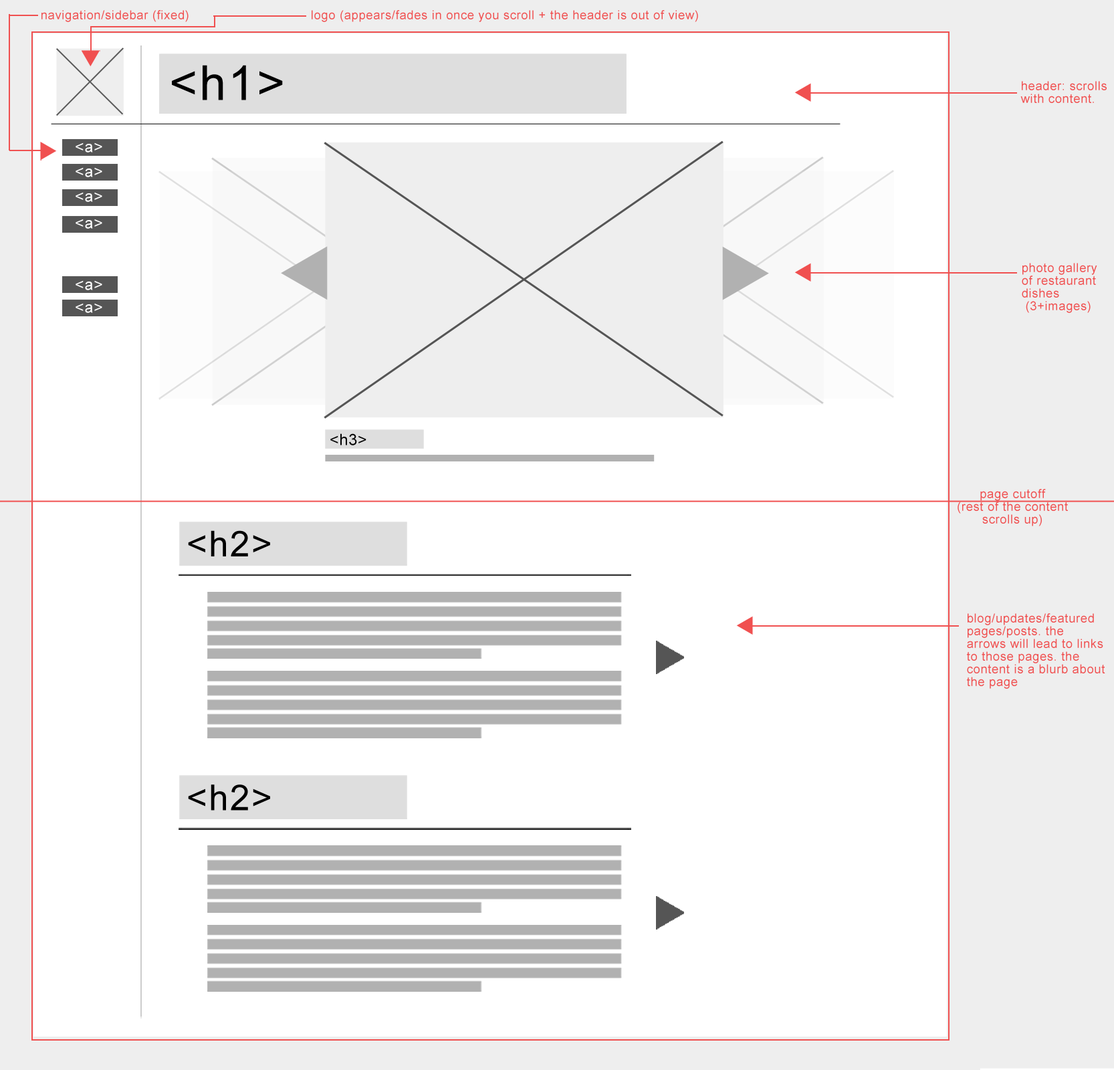
<style>
.page{position:relative;width:1114px;height:1070px;background:#ffffff}
.page>*{position:absolute;margin:0}
.t1{font:12.2px "ArialMT";letter-spacing:0.04em;color:#f05050}
.t2{font:48.3px "ArialMT";letter-spacing:0.04em;color:#000000}
.t3{font:12.2px/12.7px "ArialMT";letter-spacing:0.04em;color:#f05050}
.t4{font:15.6px "ArialMT";letter-spacing:0.04em;color:#ffffff}
.t5{font:15.6px "ArialMT";letter-spacing:0.04em;color:#000000}
.t6{font:35.8px "ArialMT";letter-spacing:0.04em;color:#000000}
</style>
<div class="page">
<p class="t1" style="left:41px;top:10px;width:148px;height:12px">navigation/sidebar (fixed)</p>
<p class="t1" style="left:312px;top:10px;width:386px;height:12px">logo (appears/fades in once you scroll + the header is out of view)</p>
<p class="t2" style="left:172px;top:65px;width:111px;height:35px">&lt;h1&gt;</p>
<p class="t3" style="left:1021px;top:81px;width:86px;height:22px">header: scrolls<br>with content.</p>
<p class="t4" style="left:76px;top:142px;width:26px;height:10px">&lt;a&gt;</p>
<p class="t4" style="left:76px;top:167px;width:26px;height:10px">&lt;a&gt;</p>
<p class="t4" style="left:76px;top:192px;width:26px;height:10px">&lt;a&gt;</p>
<p class="t4" style="left:76px;top:219px;width:26px;height:10px">&lt;a&gt;</p>
<p class="t3" style="left:1022px;top:263px;width:76px;height:50px">photo gallery <br>of restaurant<br>dishes<br> (3+images)</p>
<p class="t4" style="left:76px;top:280px;width:26px;height:10px">&lt;a&gt;</p>
<p class="t4" style="left:76px;top:303px;width:26px;height:10px">&lt;a&gt;</p>
<p class="t5" style="left:330px;top:433px;width:37px;height:12px">&lt;h3&gt;</p>
<p class="t3" style="left:958px;top:489px;width:110px;height:37px;text-align:center">page cutoff <br>(rest of the content scrolls up)</p>
<p class="t6" style="left:188px;top:530px;width:82px;height:26px">&lt;h2&gt;</p>
<p class="t3" style="left:967px;top:613px;width:139px;height:76px">blog/updates/featured pages/posts. the arrows will lead to links to those pages. the content is a blurb about the page</p>
<p class="t6" style="left:188px;top:785px;width:82px;height:26px">&lt;h2&gt;</p>
</div>
